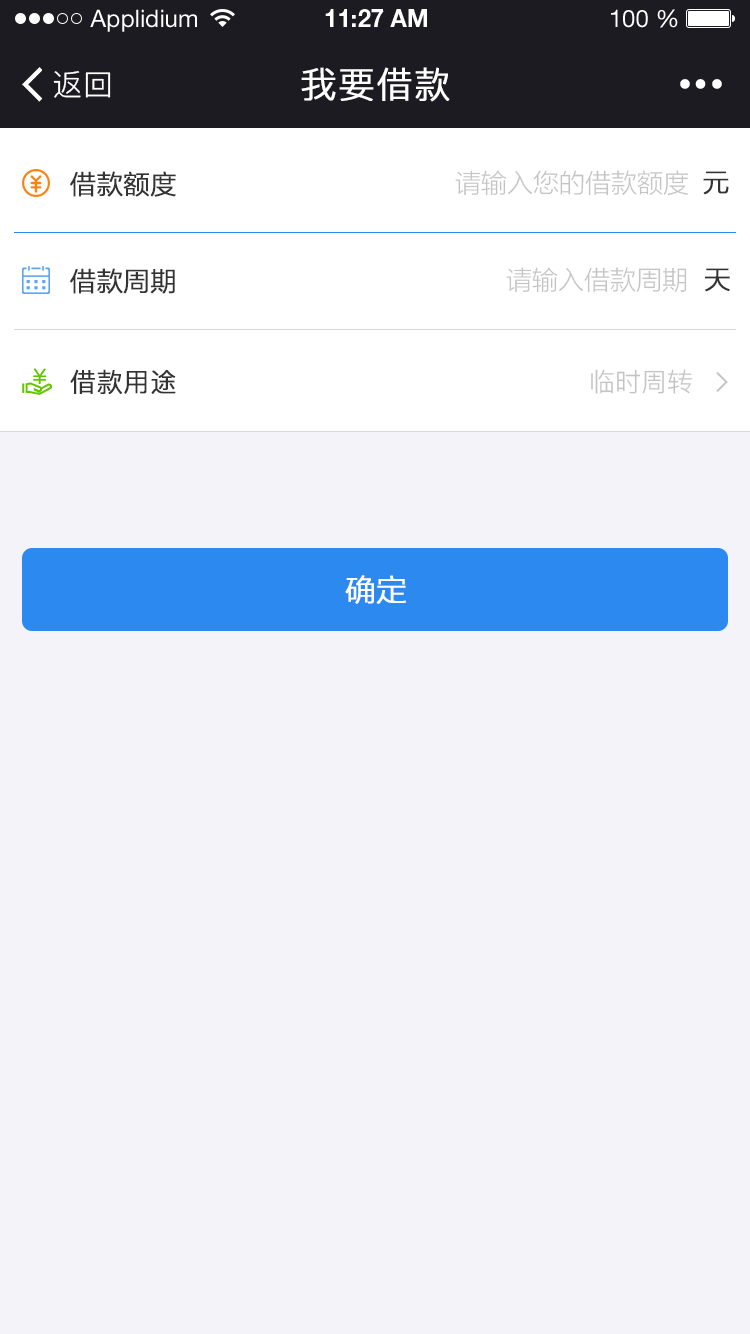
<style>
.page{position:relative;width:750px;height:1334px;background:#f4f3f9}
.page>*{position:absolute;margin:0}
.t1{font:24px "HelveticaNeueLTStd-Roman";color:#ffffff}
.t2{font:24px "HelveticaNeueLTStd-Bd";color:#ffffff}
.t3{font:30px "PingFang-SC-Regular";letter-spacing:0.025em;color:#ffffff}
.t4{font:36px "PingFang-SC-Regular";letter-spacing:0.025em;color:#ffffff;font-weight:bold}
.t5{font:26px "FZLTXHK--GBK1-0";color:#333333;font-weight:bold}
.t6{font:26px "FZLTXHK--GBK1-0";color:#c4c4c4}
.t7{font:26px "PingFang-SC-Regular";color:#333333;font-weight:bold}
.t8{font:26px "PingFang-SC-Regular";color:#c4c4c4}
.t9{font:30px "FZLTXHK--GBK1-0";color:#ffffff;font-weight:bold}
</style>
<div class="page">
<p class="t1" style="left:90px;top:9px;width:107px;height:23px">Applidium</p>
<p class="t2" style="left:325px;top:9px;width:102px;height:18px">11:27 AM</p>
<p class="t1" style="left:611px;top:9px;width:67px;height:19px">100 %</p>
<p class="t3" style="left:53px;top:71px;width:58px;height:27px">返回</p>
<p class="t4" style="left:301px;top:67px;width:149px;height:35px">我要借款</p>
<p class="t5" style="left:70px;top:171px;width:106px;height:26px">借款额度</p>
<p class="t6" style="left:455px;top:170px;width:233px;height:26px">请输入您的借款额度</p>
<p class="t5" style="left:703px;top:171px;width:26px;height:24px">元</p>
<p class="t5" style="left:70px;top:268px;width:105px;height:26px">借款周期</p>
<p class="t6" style="left:506px;top:267px;width:181px;height:26px">请输入借款周期</p>
<p class="t5" style="left:705px;top:268px;width:25px;height:24px">天</p>
<p class="t7" style="left:70px;top:369px;width:106px;height:25px">借款用途</p>
<p class="t8" style="left:591px;top:369px;width:101px;height:25px">临时周转</p>
<p class="t9" style="left:345px;top:575px;width:61px;height:29px">确定</p>
</div>
